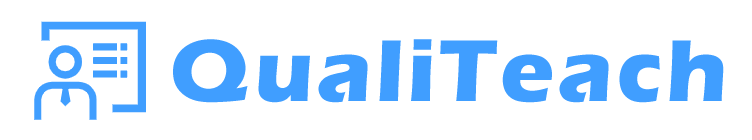
<style>
.page{position:relative;width:752px;height:140px;background:#ffffff}
.page>*{position:absolute;margin:0}
.t1{font:90.7px "ErasITC-Bold";letter-spacing:0.04em;color:#409eff}
</style>
<div class="page">
<p class="t1" style="left:173px;top:39px;width:551px;height:64px">QualiTeach</p>
</div>
